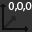
<style>
.page{position:relative;width:32px;height:32px;background:#333333}
.page>*{position:absolute;margin:0}
.t1{font:12px "MyriadPro-Regular";color:#ffffff}
</style>
<div class="page">
<p class="t1" style="left:8px;top:2px;width:24px;height:10px">0,0,0</p>
</div>
